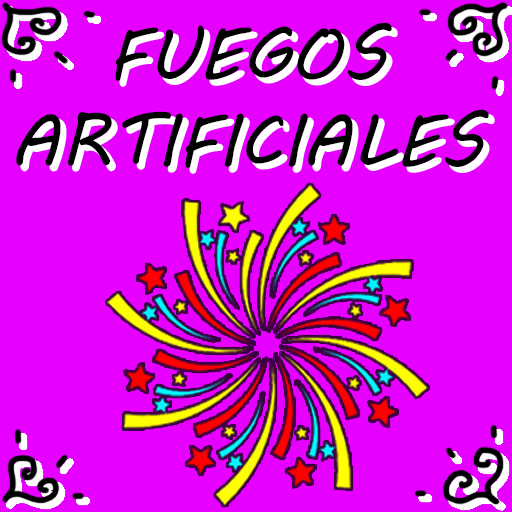
<style>
.page{position:relative;width:512px;height:512px;background:#e500ff}
.page>*{position:absolute;margin:0}
.t1{font:72px "MVBoli";color:#000000}
</style>
<div class="page">
<p class="t1" style="left:16px;top:22px;width:473px;height:146px;text-align:center">FUEGOS<br>ARTIFICIALES</p>
</div>
